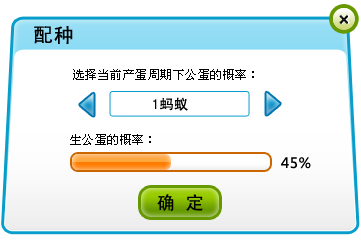
<style>
.page{position:relative;width:361px;height:250px;background:#ffffff}
.page>*{position:absolute;margin:0}
.t1{font:20px "SimHei";letter-spacing:0.04em;color:#000000}
.t2{font:12px "SimSun";letter-spacing:0.04em;color:#000000}
.t3{font:14px "SimHei";letter-spacing:0.04em;color:#000000}
.t4{font:14px "MicrosoftYaHei";letter-spacing:0.04em;color:#000000}
.t5{font:18px "SimHei";letter-spacing:0.04em;color:#000000}
</style>
<div class="page">
<p class="t1" style="left:34px;top:26px;width:39px;height:18px">配种</p>
<p class="t2" style="left:73px;top:69px;width:181px;height:11px">选择当前产蛋周期下公蛋的概率：</p>
<p class="t3" style="left:153px;top:97px;width:35px;height:14px">1蚂蚁</p>
<p class="t2" style="left:70px;top:134px;width:81px;height:11px">生公蛋的概率：</p>
<p class="t4" style="left:281px;top:157px;width:30px;height:12px">45%</p>
<p class="t5" style="left:157px;top:194px;width:46px;height:17px">确 定</p>
</div>
